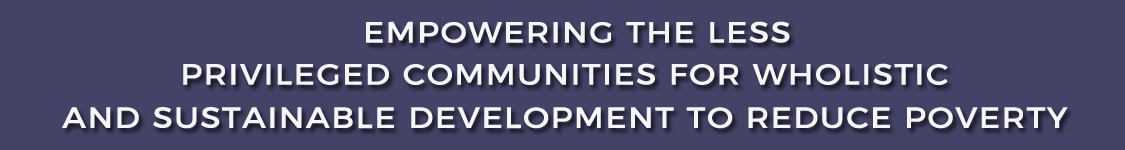
<style>
.page{position:relative;width:1125px;height:150px;background:#434367}
.page>*{position:absolute;margin:0}
.t1{font:29.4px "Montserrat-Regular";letter-spacing:0.02em;color:#f6f6f8;text-transform:uppercase;font-weight:bold;scale:1.1 1}
</style>
<div class="page">
<p class="t1" style="left:366px;top:21px;width:424px;height:22px">empowering the less</p>
<p class="t1" style="left:183px;top:63px;width:765px;height:22px">privileged communities for wholistic</p>
<p class="t1" style="left:62px;top:107px;width:1006px;height:22px">and sustainable development to reduce poverty</p>
</div>
